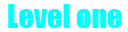
<style>
.page{position:relative;width:128px;height:32px;background:#ffffff}
.page>*{position:absolute;margin:0}
.t1{font:30px "Impact";color:#00ffff}
</style>
<div class="page">
<p class="t1" style="left:8px;top:4px;width:114px;height:24px">Level one</p>
</div>
